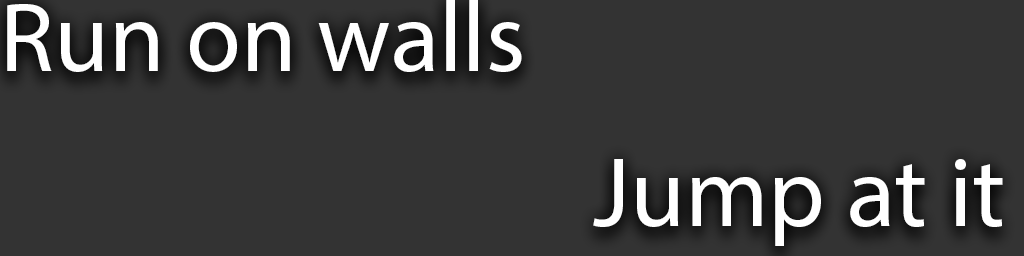
<style>
.page{position:relative;width:1024px;height:256px;background:#333333}
.page>*{position:absolute;margin:0}
.t1{font:100px "MyriadPro-Regular";color:#ffffff}
</style>
<div class="page">
<p class="t1" style="left:7px;top:0px;width:515px;height:72px">Run on walls</p>
<p class="t1" style="left:593px;top:159px;width:410px;height:87px">Jump at it</p>
</div>
